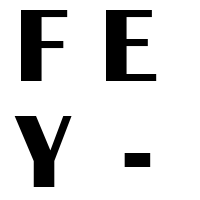
<style>
.page{position:relative;width:200px;height:200px;background:#ffffff}
.page>*{position:absolute;margin:0}
.t1{font:105.7px "BritannicBold";letter-spacing:0.075em;color:#000000}
</style>
<div class="page">
<p class="t1" style="left:21px;top:10px;width:47px;height:71px">F</p>
<p class="t1" style="left:106px;top:10px;width:51px;height:71px">E</p>
<p class="t1" style="left:14px;top:116px;width:58px;height:71px">Y</p>
<p class="t1" style="left:124px;top:153px;width:27px;height:14px">-</p>
</div>
